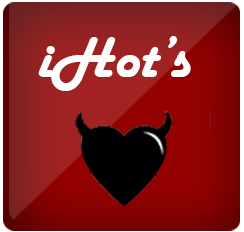
<style>
.page{position:relative;width:244px;height:232px}
.page>*{position:absolute;margin:0}
.t1{font:59.9px "HarlowSolid";color:#ffffff}
</style>
<div class="page">
<p class="t1" style="left:38px;top:36px;width:153px;height:55px">iHot’s</p>
</div>
